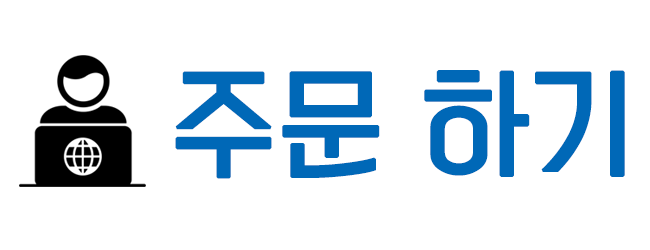
<style>
.page{position:relative;width:650px;height:250px;background:#ffffff}
.page>*{position:absolute;margin:0}
.t1{font:110px "KoreanYNSJG3-R";color:#0068b7;font-weight:bold}
</style>
<div class="page">
<p class="t1" style="left:175px;top:70px;width:450px;height:109px">주문 하기</p>
</div>
